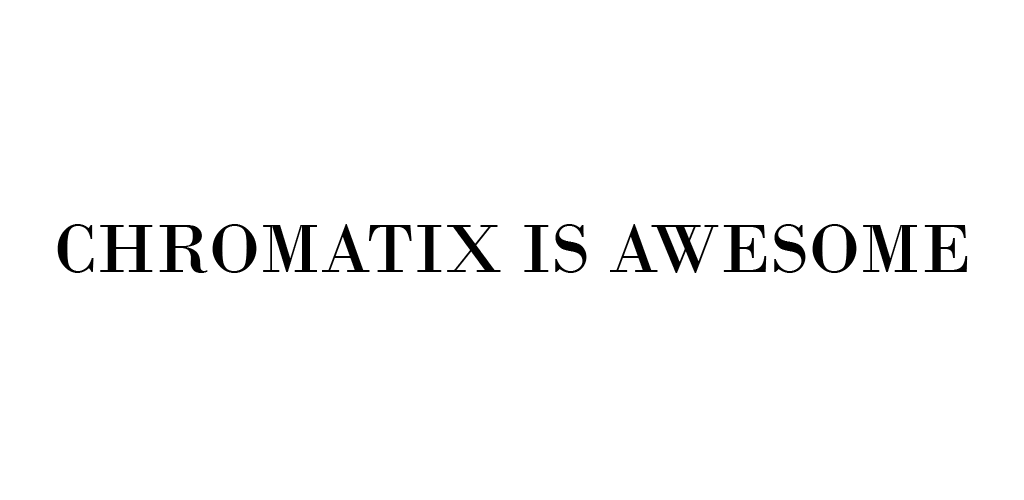
<style>
.page{position:relative;width:1024px;height:500px;background:#ffffff}
.page>*{position:absolute;margin:0}
.t1{font:72px "BodoniMT";color:#000000}
</style>
<div class="page">
<p class="t1" style="left:57px;top:224px;width:911px;height:49px">CHROMATIX IS AWESOME</p>
</div>
